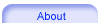
<style>
.page{position:relative;width:100px;height:23px;background:#e1e4fc}
.page>*{position:absolute;margin:0}
.t1{font:11px "ArialMT";color:#092ff6}
</style>
<div class="page">
<p class="t1" style="left:37px;top:12px;width:29px;height:8px">About</p>
</div>
